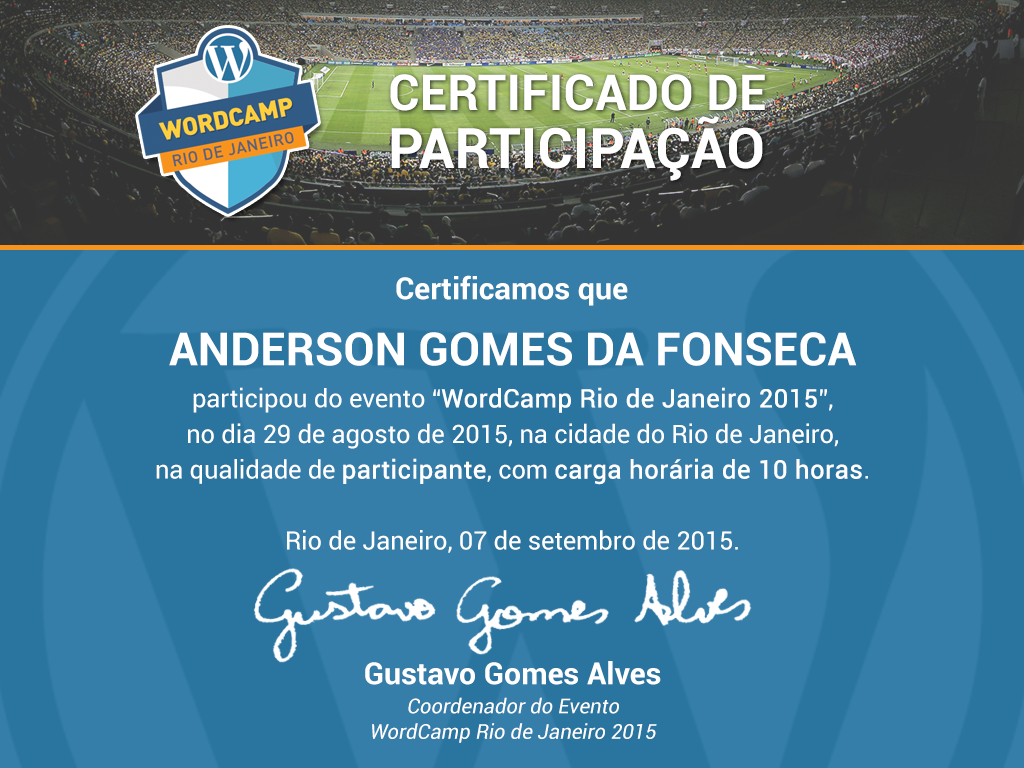
<style>
.page{position:relative;width:1024px;height:768px;background:#357eaa}
.page>*{position:absolute;margin:0}
.t1{font:49.7px/58px "Roboto-Bold";color:#ffffff;text-transform:uppercase}
.t2{font:55.9px/58px "Roboto-Bold";color:#ffffff;text-transform:uppercase}
.t3{font:30.5px "Roboto-Bold";color:#ffffff}
.t4{font:45.7px "Roboto-Bold";color:#ffffff;text-transform:uppercase}
.t5{font:25.4px/35.6px "Roboto-Regular";color:#ffffff}
.t6{font:25.4px/35.6px "Roboto-Regular";color:#ffffff;font-weight:bold}
.t7{font:20.3px/25.4px "Roboto-Regular";color:#ffffff;font-style:italic}
</style>
<div class="page">
<p class="t1" style="left:390px;top:74px;width:375px;height:107px">certificado de<br><span class="t2">participação</span></p>
<p class="t3" style="left:396px;top:275px;width:232px;height:31px">Certificamos que</p>
<p class="t4" style="left:169px;top:332px;width:688px;height:34px">anderson gomes da fonseca</p>
<p class="t5" style="left:156px;top:387px;width:712px;height:166px;text-align:center">participou do evento “<span class="t6">WordCamp Rio de Janeiro 2015</span>”,<br>no dia 29 de agosto de 2015, na cidade do Rio de Janeiro,<br>na qualidade de <span class="t6">participante</span>, com <span class="t6">carga horária de 10 horas</span>.<br><br>Rio de Janeiro, 07 de setembro de 2015.</p>
<p class="t3" style="left:365px;top:661px;width:296px;height:24px">Gustavo Gomes Alves</p>
<p class="t7" style="left:372px;top:697px;width:285px;height:46px;text-align:center">Coordenador do Evento<br>WordCamp Rio de Janeiro 2015</p>
</div>
